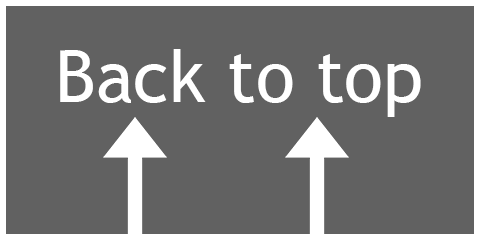
<style>
.page{position:relative;width:480px;height:240px;background:#616161}
.page>*{position:absolute;margin:0}
.t1{font:72px "TrebuchetMS";color:#ffffff}
</style>
<div class="page">
<p class="t1" style="left:60px;top:49px;width:361px;height:68px">Back to top</p>
</div>
